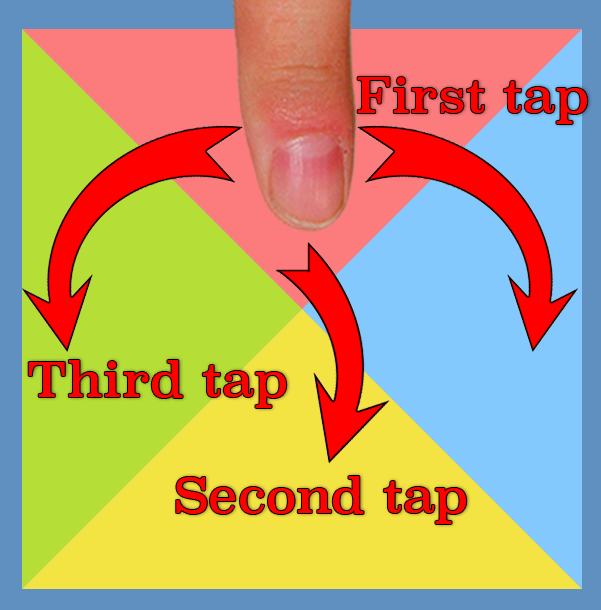
<style>
.page{position:relative;width:601px;height:610px}
.page>*{position:absolute;margin:0}
.t1{font:48px "Superclarendon-Regular";color:#ff0000}
</style>
<div class="page">
<p class="t1" style="left:357px;top:77px;width:231px;height:47px">First tap</p>
<p class="t1" style="left:28px;top:360px;width:259px;height:48px">Third tap</p>
<p class="t1" style="left:176px;top:476px;width:291px;height:48px">Second tap</p>
</div>
